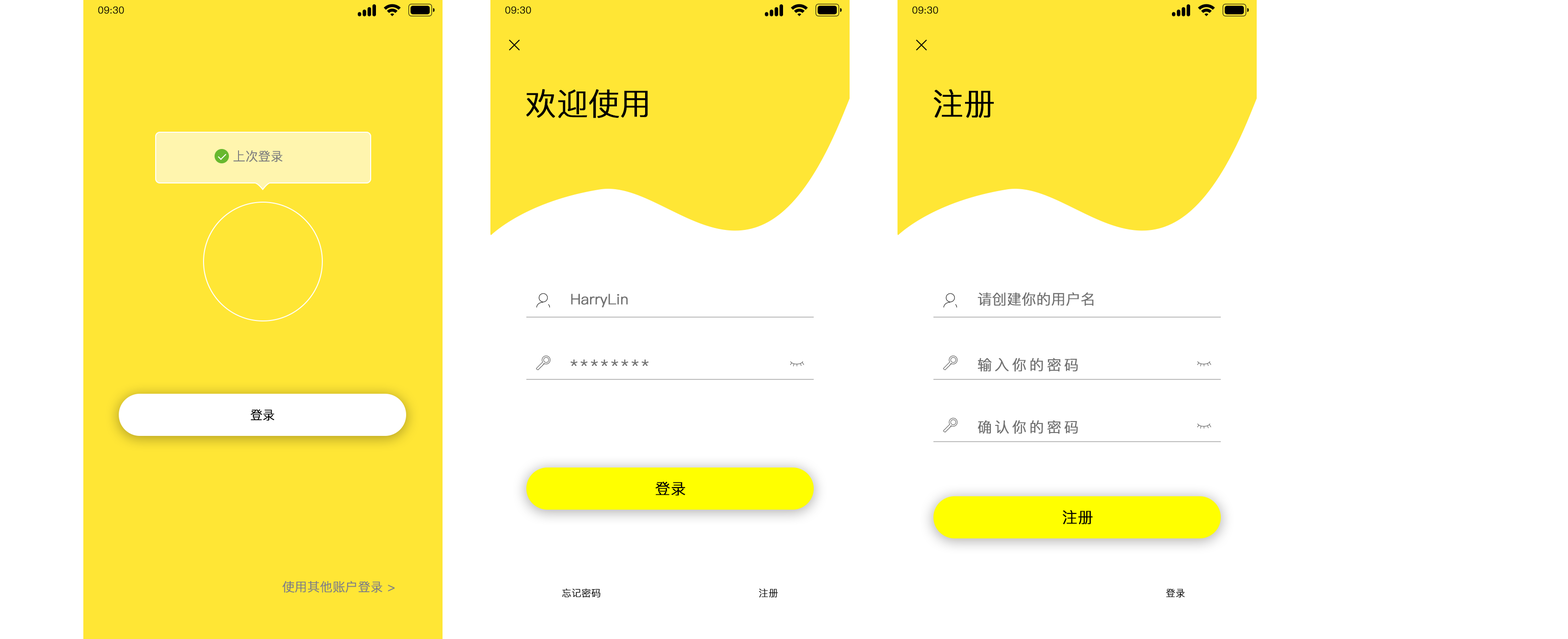
<style>
.page{position:relative;width:1568px;height:639px;background:#ffffff}
.page>*{position:absolute;margin:0}
.t1{font:9.6px "PingFang-SC-Regular";color:#000000;font-weight:bold}
.t2{font:30.8px "PingFang-SC-Regular";color:#000000;font-weight:bold}
.t3{font:12.3px "PingFang-SC-Regular";color:#808080;font-weight:bold}
.t4{font:14.4px "PingFang-SC-Regular";color:#707070;font-weight:bold}
.t5{font:14.4px "PingFang-SC-Regular";letter-spacing:0.18em;color:#707070;font-weight:bold}
.t6{font:12.3px "PingFang-SC-Regular";color:#000000;font-weight:bold}
.t7{font:15.2px "PingFang-SC-Regular";color:#000000;font-weight:bold}
</style>
<div class="page">
<p class="t1" style="left:98px;top:6px;width:26px;height:8px">09:30</p>
<p class="t1" style="left:505px;top:6px;width:26px;height:8px">09:30</p>
<p class="t1" style="left:912px;top:6px;width:26px;height:8px">09:30</p>
<p class="t2" style="left:526px;top:89px;width:122px;height:29px">欢迎使用</p>
<p class="t2" style="left:933px;top:89px;width:61px;height:29px">注册</p>
<p class="t3" style="left:233px;top:150px;width:50px;height:12px">上次登录</p>
<p class="t4" style="left:571px;top:294px;width:57px;height:13px">HarryLin</p>
<p class="t4" style="left:977px;top:292px;width:116px;height:14px">请创建你的用户名</p>
<p class="t5" style="left:570px;top:359px;width:79px;height:7px">********</p>
<p class="t5" style="left:977px;top:358px;width:101px;height:14px">输入你的密码</p>
<p class="t6" style="left:250px;top:409px;width:24px;height:11px">登录</p>
<p class="t5" style="left:977px;top:420px;width:101px;height:14px">确认你的密码</p>
<p class="t7" style="left:655px;top:481px;width:30px;height:15px">登录</p>
<p class="t7" style="left:1063px;top:510px;width:30px;height:14px">注册</p>
<p class="t3" style="left:283px;top:581px;width:112px;height:11px">使用其他账户登录 &gt;</p>
<p class="t1" style="left:562px;top:588px;width:39px;height:10px">忘记密码</p>
<p class="t1" style="left:759px;top:588px;width:19px;height:10px">注册</p>
<p class="t1" style="left:1166px;top:589px;width:19px;height:9px">登录</p>
</div>
